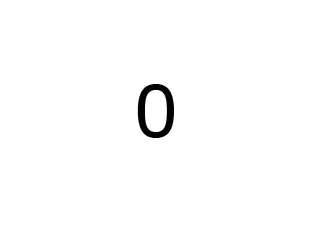
<style>
.page{position:relative;width:320px;height:240px;background:#ffffff}
.page>*{position:absolute;margin:0}
.t1{font:72px "Verdana";color:#000000}
</style>
<div class="page">
<p class="t1" style="left:137px;top:84px;width:37px;height:54px">0</p>
</div>
